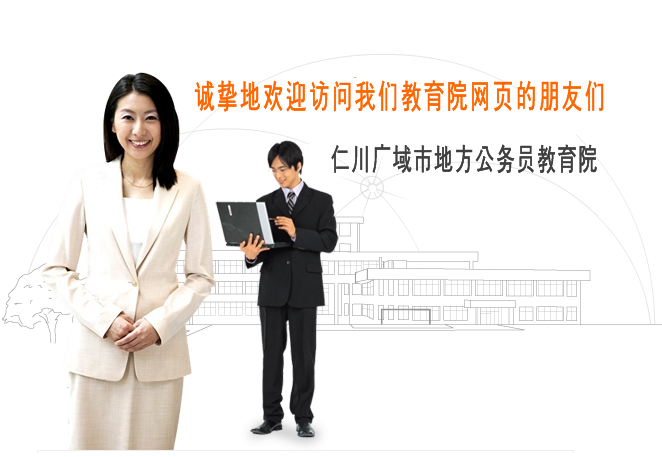
<style>
.page{position:relative;width:662px;height:457px;background:#ffffff}
.page>*{position:absolute;margin:0}
.t1{font:33.6px "New-Gulim";letter-spacing:0.1em;color:#ff6600;font-weight:bold;scale:0.61 1}
.t2{font:30.8px "New-Gulim";letter-spacing:0.075em;color:#3f3f3f;font-weight:bold;scale:0.61 1}
</style>
<div class="page">
<p class="t1" style="left:194px;top:80px;width:410px;height:32px">诚挚地欢迎访问我们教育院网页的朋友们</p>
<p class="t2" style="left:331px;top:144px;width:266px;height:30px">仁川广域市地方公务员教育院</p>
</div>
